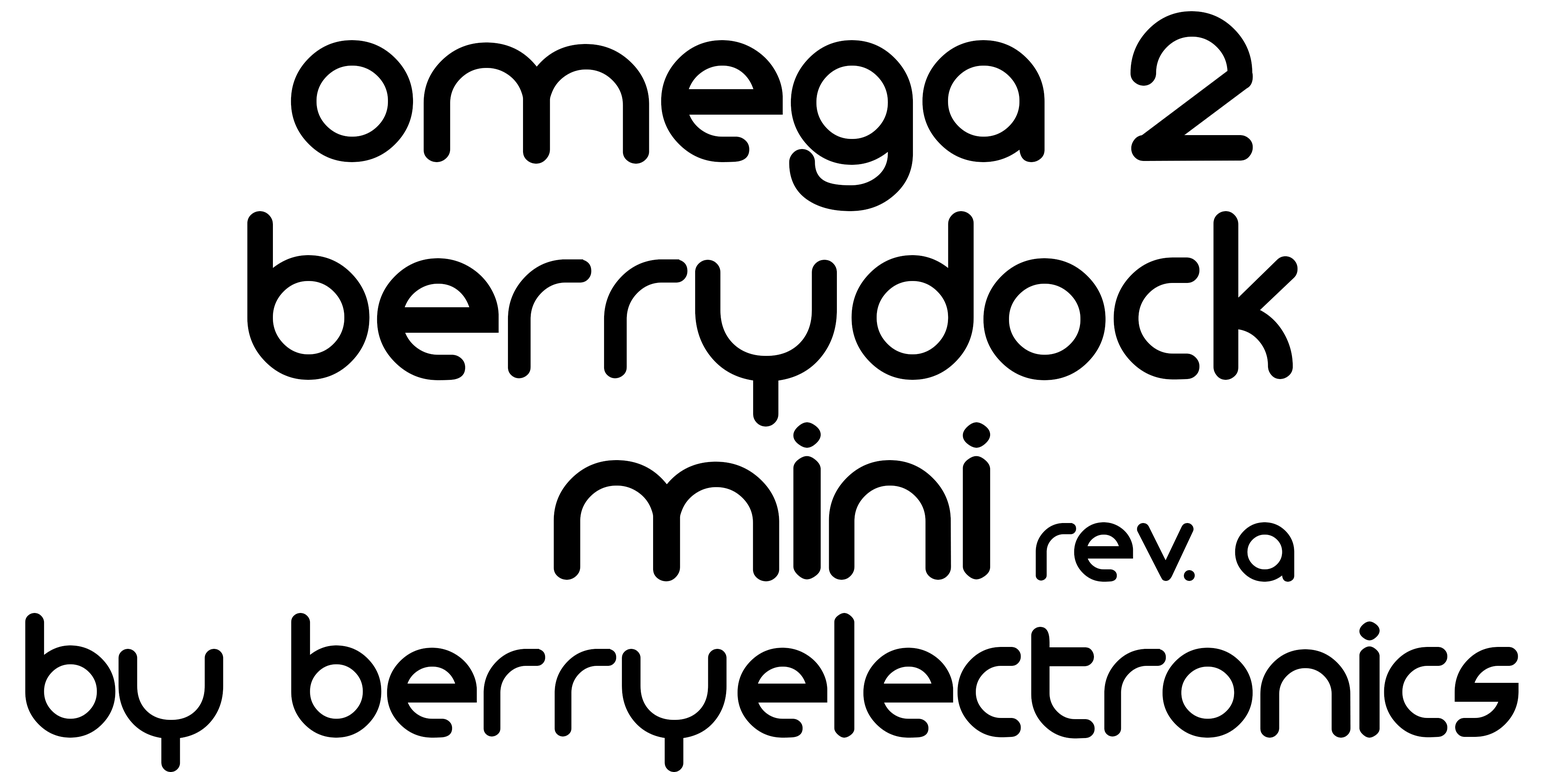
<style>
.page{position:relative;width:1544px;height:772px;background:#ffffff}
.page>*{position:absolute;margin:0}
.t1{font:239px "MonoglycerideBold";color:#000000}
.t2{font:239px/199.6px "MonoglycerideBold";color:#000000}
.t3{font:115.8px "MonoglycerideBold";color:#000000}
.t4{font:176.4px "MonoglycerideBold";color:#000000}
</style>
<div class="page">
<p class="t1" style="left:291px;top:11px;width:962px;height:200px">omega 2</p>
<p class="t2" style="left:247px;top:211px;width:1051px;height:370px;text-align:center">berrydock<br>mini</p>
<p class="t3" style="left:1036px;top:522px;width:259px;height:60px">rev. a</p>
<p class="t4" style="left:25px;top:613px;width:1494px;height:159px">by berryelectronics</p>
</div>
